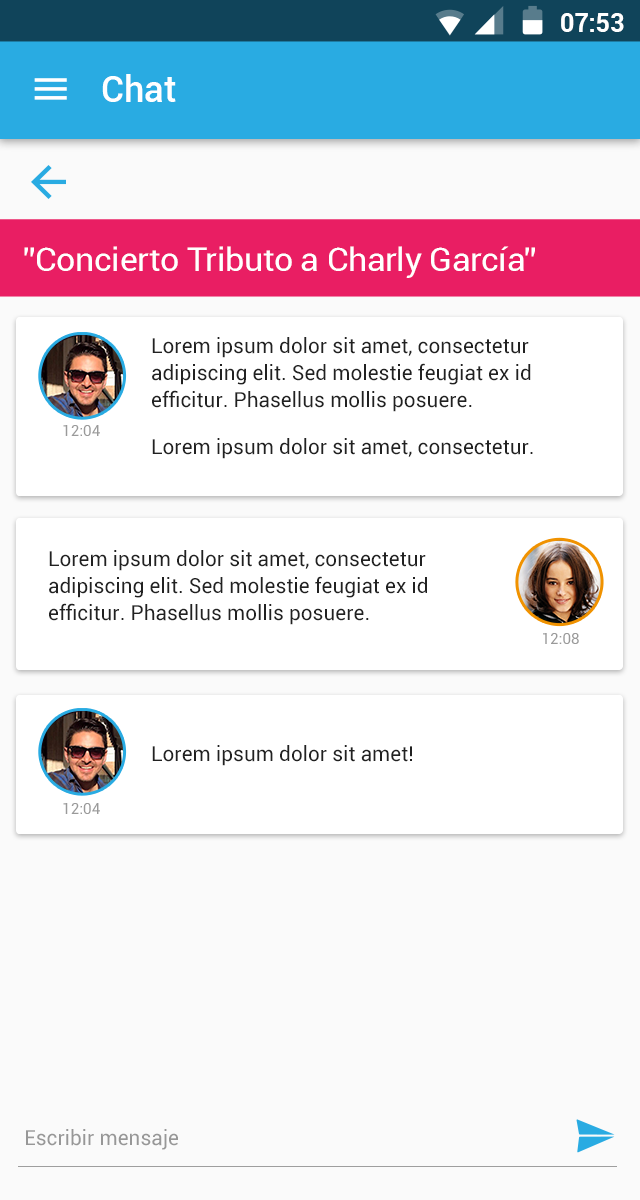
<style>
.page{position:relative;width:640px;height:1200px;background:#fafafa}
.page>*{position:absolute;margin:0}
.t1{font:24.9px "Roboto-Bold";color:#ffffff}
.t2{font:35.8px "Roboto-Medium";letter-spacing:0.005em;color:#ffffff}
.t3{font:33.3px "Roboto-Regular";letter-spacing:-0.01em;color:#ffffff}
.t4{font:20.8px/27.1px "Roboto-Regular";color:#212121}
.t5{font:15.3px "Roboto-Regular";color:#9a9a9a}
.t6{font:20.8px "Roboto-Regular";color:#212121}
.t7{font:20.8px "Roboto-Regular";color:#979797}
</style>
<div class="page">
<p class="t1" style="left:561px;top:13px;width:63px;height:19px">07:53</p>
<p class="t2" style="left:102px;top:74px;width:74px;height:28px">Chat</p>
<p class="t3" style="left:24px;top:246px;width:511px;height:32px">”Concierto Tributo a Charly García”</p>
<p class="t4" style="left:152px;top:337px;width:379px;height:75px">Lorem ipsum dolor sit amet, consectetur adipiscing elit. Sed molestie feugiat ex id efficitur. Phasellus mollis posuere.</p>
<p class="t5" style="left:63px;top:425px;width:37px;height:11px">12:04</p>
<p class="t6" style="left:152px;top:438px;width:381px;height:21px">Lorem ipsum dolor sit amet, consectetur.</p>
<p class="t4" style="left:49px;top:550px;width:378px;height:75px">Lorem ipsum dolor sit amet, consectetur adipiscing elit. Sed molestie feugiat ex id efficitur. Phasellus mollis posuere.</p>
<p class="t5" style="left:543px;top:633px;width:36px;height:11px">12:08</p>
<p class="t6" style="left:152px;top:745px;width:260px;height:21px">Lorem ipsum dolor sit amet!</p>
<p class="t5" style="left:63px;top:803px;width:37px;height:11px">12:04</p>
<p class="t7" style="left:26px;top:1129px;width:152px;height:21px">Escribir mensaje</p>
</div>
